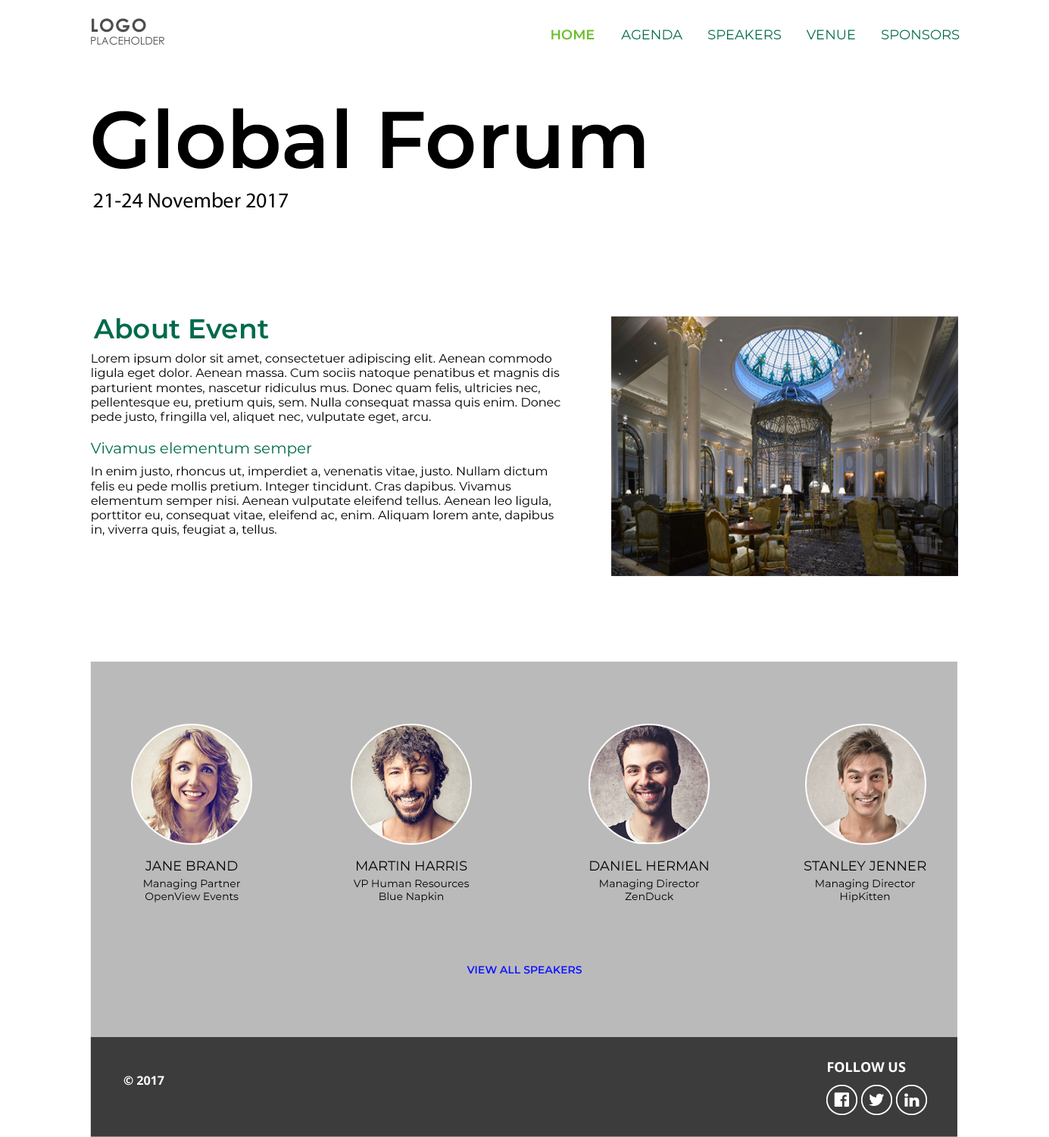
<style>
.page{position:relative;width:1049px;height:1137px;background:#ffffff}
.page>*{position:absolute;margin:0}
.t1{font:13.6px "Montserrat-Regular";color:#006a4d}
.t2{font:13.6px "Montserrat-SemiBold";color:#69be28}
.t3{font:80.3px "Montserrat-SemiBold";color:#000000}
.t4{font:21.2px "MyriadPro-Regular";color:#020202}
.t5{font:27.3px "Montserrat-SemiBold";color:#006a4d}
.t6{font:12.1px "Montserrat-Regular";color:#000000}
.t7{font:15.1px "Montserrat-Regular";color:#006a4d}
.t8{font:10.6px "Montserrat-Regular";color:#000000}
.t9{font:13.6px/27.3px "Montserrat-Regular";color:#000000}
.t10{font:10.6px "Montserrat-SemiBold";color:#0e14ff}
.t11{font:13.6px "OpenSans-Bold";color:#ffffff}
.t12{font:12.1px "OpenSans-Bold";color:#ffffff}
</style>
<div class="page">
<p class="t1" style="left:551px;top:30px;width:408px;height:10px"><span class="t2">HOME       </span>AGENDA       SPEAKERS       VENUE       SPONSORS</p>
<p class="t3" style="left:92px;top:108px;width:552px;height:61px">Global Forum</p>
<p class="t4" style="left:93px;top:192px;width:195px;height:16px">21-24 November 2017</p>
<p class="t5" style="left:93px;top:318px;width:176px;height:21px">About Event</p>
<p class="t6" style="left:90px;top:354px;width:470px;height:182px">Lorem ipsum dolor sit amet, consectetuer adipiscing elit. Aenean commodo ligula eget dolor. Aenean massa. Cum sociis natoque penatibus et magnis dis parturient montes, nascetur ridiculus mus. Donec quam felis, ultricies nec, pellentesque eu, pretium quis, sem. Nulla consequat massa quis enim. Donec pede justo, fringilla vel, aliquet nec, vulputate eget, arcu.<br><br><span class="t7">Vivamus elementum semper<br>  <br></span>In enim justo, rhoncus ut, imperdiet a, venenatis vitae, justo. Nullam dictum felis eu pede mollis pretium. Integer tincidunt. Cras dapibus. Vivamus elementum semper nisi. Aenean vulputate eleifend tellus. Aenean leo ligula, porttitor eu, consequat vitae, eleifend ac, enim. Aliquam lorem ante, dapibus in, viverra quis, feugiat a, tellus.</p>
<p class="t8" style="left:144px;top:861px;width:96px;height:41px;text-align:center"><span class="t9">JANE BRAND<br></span>Managing Partner<br>OpenView Events</p>
<p class="t8" style="left:353px;top:861px;width:116px;height:41px;text-align:center"><span class="t9">MARTIN HARRIS<br></span>VP Human Resources<br>Blue Napkin</p>
<p class="t8" style="left:590px;top:861px;width:118px;height:39px;text-align:center"><span class="t9">DANIEL HERMAN<br></span>Managing Director<br>ZenDuck</p>
<p class="t8" style="left:804px;top:861px;width:122px;height:41px;text-align:center"><span class="t9">STANLEY JENNER<br></span>Managing Director<br>HipKitten</p>
<p class="t10" style="left:466px;top:966px;width:115px;height:8px">VIEW ALL SPEAKERS</p>
<p class="t11" style="left:828px;top:1062px;width:77px;height:11px">FOLLOW US</p>
<p class="t12" style="left:123px;top:1076px;width:41px;height:10px">© 2017</p>
</div>
